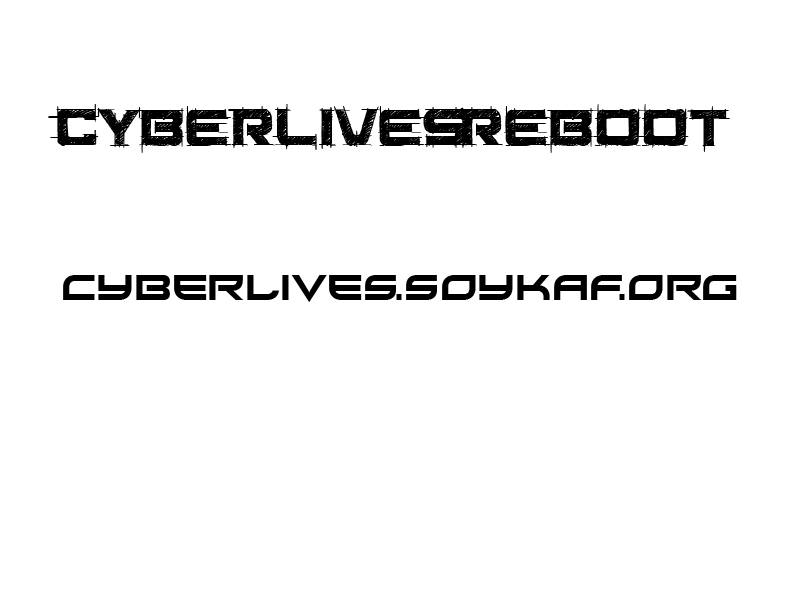
<style>
.page{position:relative;width:800px;height:600px;background:#ffffff}
.page>*{position:absolute;margin:0}
.t1{font:60px "SaucerBB";color:#000000}
.t2{font:36px "Xirod-Regular";color:#000000}
</style>
<div class="page">
<p class="t1" style="left:48px;top:104px;width:419px;height:49px">CYBERLIVES</p>
<p class="t1" style="left:457px;top:104px;width:273px;height:49px">REBOOT</p>
<p class="t2" style="left:63px;top:275px;width:674px;height:27px">CYBERLIVES.SOYKAF.ORG</p>
</div>
